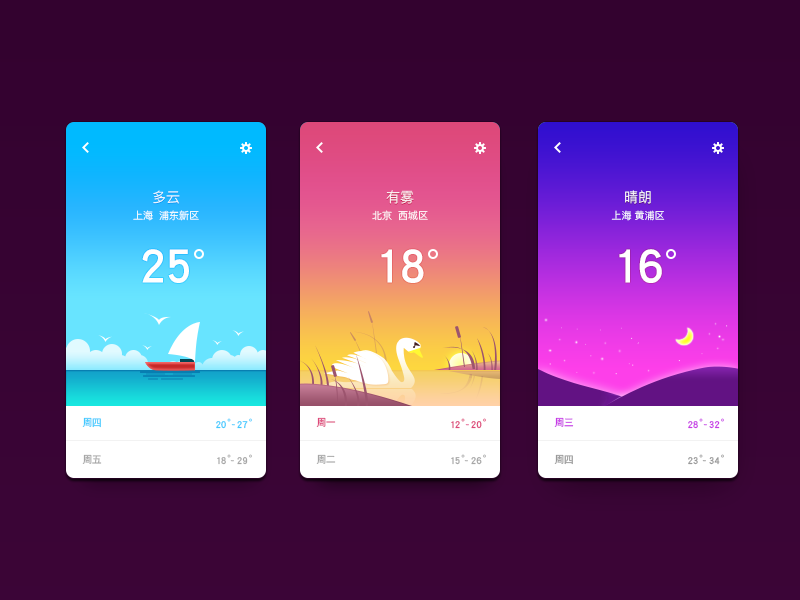
<style>
.page{position:relative;width:800px;height:600px}
.page>*{position:absolute;margin:0}
.t1{font:14px "PingFang-SC-Regular";color:#ffffff}
.t2{font:10px "PingFang-SC-Regular";color:#ffffff}
.t3{font:54px "DFPHeiW7";letter-spacing:-0.05em;color:#ffffff}
.t4{font:10px "DFPHeiW7";letter-spacing:-0.05em;color:#41caff}
.t5{font:11px "DFPHeiW7";letter-spacing:-0.05em;color:#41caff}
.t6{font:11px "DFPHeiW7";letter-spacing:-0.05em}
.t7{font:10px "DFPHeiW7";letter-spacing:-0.05em;color:#dd487a}
.t8{font:11px "DFPHeiW7";letter-spacing:-0.05em;color:#dd4879}
.t9{font:10px "DFPHeiW7";letter-spacing:-0.05em;color:#c739e6}
.t10{font:11px "DFPHeiW7";letter-spacing:-0.05em;color:#c739e6}
.t11{font:10px "DFPHeiW7";letter-spacing:-0.05em;color:#a6a6a6}
.t12{font:11px "DFPHeiW7";letter-spacing:-0.05em;color:#a6a6a6}
.t13{font:10px "DFPHeiW7";letter-spacing:-0.05em;color:#999999}
.t14{font:11px "DFPHeiW7";letter-spacing:-0.05em;color:#999999}
</style>
<div class="page">
<p class="t1" style="left:153px;top:190px;width:27px;height:14px">多云</p>
<p class="t1" style="left:386px;top:190px;width:28px;height:14px">有雾</p>
<p class="t1" style="left:625px;top:190px;width:26px;height:14px">晴朗</p>
<p class="t2" style="left:133px;top:210px;width:66px;height:11px">上海  浦东新区</p>
<p class="t2" style="left:372px;top:210px;width:56px;height:11px">北京  西城区</p>
<p class="t2" style="left:611px;top:210px;width:54px;height:11px">上海 黄浦区</p>
<p class="t3" style="left:142px;top:249px;width:47px;height:34px">25</p>
<p class="t3" style="left:381px;top:249px;width:43px;height:34px">18</p>
<p class="t3" style="left:619px;top:249px;width:43px;height:34px">16</p>
<p class="t4" style="left:82px;top:417px;width:19px;height:11px">周四</p>
<p class="t5" style="left:216px;top:418px;width:36px;height:11px">20°27°</p>
<p class="t6" style="left:231px;top:424px;width:4px;height:2px">~</p>
<p class="t7" style="left:316px;top:417px;width:20px;height:10px">周一</p>
<p class="t8" style="left:451px;top:418px;width:35px;height:11px">12°20°</p>
<p class="t6" style="left:465px;top:424px;width:4px;height:2px">~</p>
<p class="t9" style="left:554px;top:417px;width:20px;height:10px">周三</p>
<p class="t10" style="left:688px;top:418px;width:36px;height:11px">28°32°</p>
<p class="t6" style="left:703px;top:424px;width:4px;height:2px">~</p>
<p class="t11" style="left:82px;top:454px;width:20px;height:10px">周五</p>
<p class="t12" style="left:217px;top:454px;width:35px;height:11px">18°29°</p>
<p class="t6" style="left:230px;top:460px;width:4px;height:2px">~</p>
<p class="t11" style="left:316px;top:454px;width:20px;height:10px">周二</p>
<p class="t12" style="left:451px;top:454px;width:35px;height:11px">15°26°</p>
<p class="t6" style="left:464px;top:460px;width:4px;height:2px">~</p>
<p class="t13" style="left:554px;top:454px;width:19px;height:11px">周四</p>
<p class="t14" style="left:688px;top:454px;width:36px;height:11px">23°34°</p>
<p class="t6" style="left:702px;top:460px;width:4px;height:2px">~</p>
</div>
